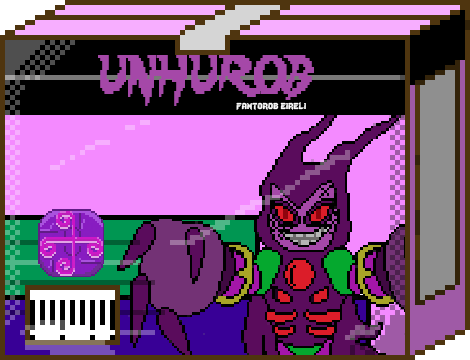
<style>
.page{position:relative;width:470px;height:360px}
.page>*{position:absolute;margin:0}
.t1{font:48px "Lady-Radical";color:#a548a8;scale:0.72 1}
.t2{font:12px "Lady-Radical";color:#fbfbfb}
</style>
<div class="page">
<p class="t1" style="left:98px;top:55px;width:216px;height:51px">UNHUROB</p>
<p class="t2" style="left:236px;top:102px;width:70px;height:8px">fantorob eireli</p>
</div>
